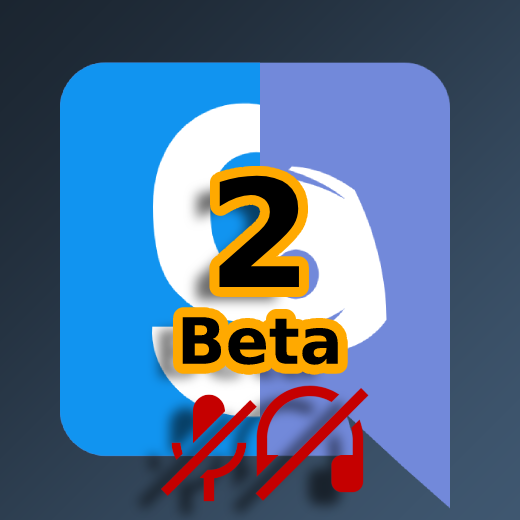
<style>
.page{position:relative;width:520px;height:520px}
.page>*{position:absolute;margin:0}
.t1{font:64px "DejaVuSans-Bold";color:#000000}
.t2{font:150px "DejaVuSans-Bold";color:#000000}
</style>
<div class="page">
<p class="t1" style="left:182px;top:175px;width:156px;height:190px;text-align:center"><span class="t2">2<br></span>Beta</p>
</div>
